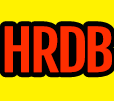
<style>
.page{position:relative;width:114px;height:101px;background:#fff200}
.page>*{position:absolute;margin:0}
.t1{font:54.2px "FjallaOne-Regular";letter-spacing:-0.08em;color:#ff2e00;font-weight:bold;scale:1.08 1}
</style>
<div class="page">
<p class="t1" style="left:4px;top:26px;width:108px;height:47px">HRDB</p>
</div>
